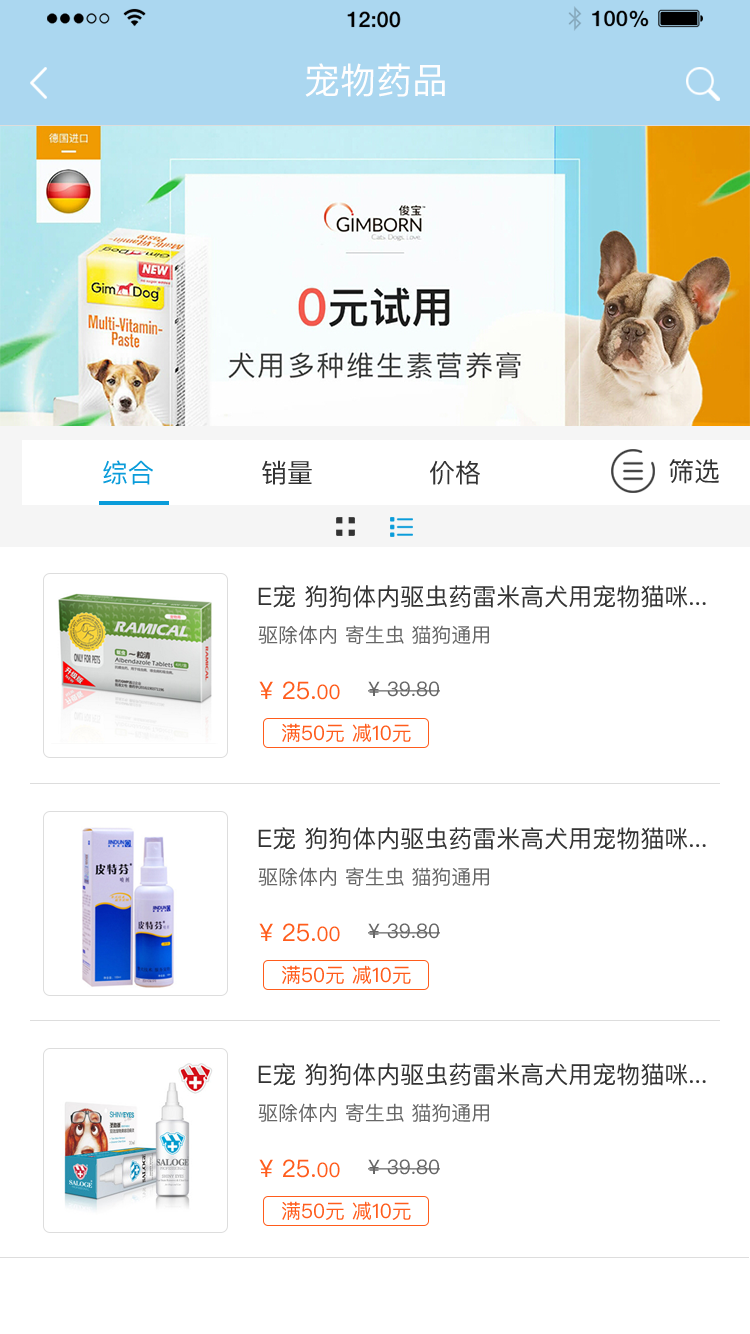
<style>
.page{position:relative;width:750px;height:1334px;background:#ffffff}
.page>*{position:absolute;margin:0}
.t1{font:36px "PingFangSC";color:#fffefe}
.t2{font:26px "PingFangSC";color:#0a9cda}
.t3{font:26px "PingFangSC";color:#333333}
.t4{font:26px "PingFangSC-Regular";color:#333333}
.t5{font:24px "PingFangSC";color:#333333}
.t6{font:20px "PingFangSC";color:#666666}
.t7{font:24px "PingFangSC";color:#ff5c1c}
.t8{font:20px "PingFangSC";color:#ff5c1c}
</style>
<div class="page">
<p class="t1" style="left:305px;top:63px;width:140px;height:34px">宠物药品</p>
<p class="t2" style="left:103px;top:460px;width:50px;height:25px">综合</p>
<p class="t3" style="left:262px;top:460px;width:50px;height:25px">销量</p>
<p class="t3" style="left:430px;top:460px;width:50px;height:25px">价格</p>
<p class="t4" style="left:669px;top:459px;width:50px;height:25px">筛选</p>
<p class="t5" style="left:258px;top:585px;width:448px;height:23px">E宠 狗狗体内驱虫药雷米高犬用宠物猫咪...</p>
<p class="t6" style="left:258px;top:625px;width:231px;height:19px">驱除体内 寄生虫 猫狗通用</p>
<p class="t7" style="left:259px;top:681px;width:81px;height:19px">¥ 25.<span class="t8">00</span></p>
<p class="t6" style="left:368px;top:681px;width:72px;height:16px">¥ 39.80</p>
<p class="t8" style="left:282px;top:723px;width:129px;height:19px">满50元 减10元</p>
<p class="t5" style="left:258px;top:827px;width:448px;height:23px">E宠 狗狗体内驱虫药雷米高犬用宠物猫咪...</p>
<p class="t6" style="left:258px;top:867px;width:231px;height:19px">驱除体内 寄生虫 猫狗通用</p>
<p class="t7" style="left:259px;top:923px;width:81px;height:19px">¥ 25.<span class="t8">00</span></p>
<p class="t6" style="left:368px;top:923px;width:72px;height:16px">¥ 39.80</p>
<p class="t8" style="left:282px;top:965px;width:129px;height:19px">满50元 减10元</p>
<p class="t5" style="left:258px;top:1063px;width:448px;height:23px">E宠 狗狗体内驱虫药雷米高犬用宠物猫咪...</p>
<p class="t6" style="left:258px;top:1103px;width:231px;height:19px">驱除体内 寄生虫 猫狗通用</p>
<p class="t7" style="left:259px;top:1159px;width:81px;height:19px">¥ 25.<span class="t8">00</span></p>
<p class="t6" style="left:368px;top:1159px;width:72px;height:16px">¥ 39.80</p>
<p class="t8" style="left:282px;top:1201px;width:129px;height:19px">满50元 减10元</p>
</div>
